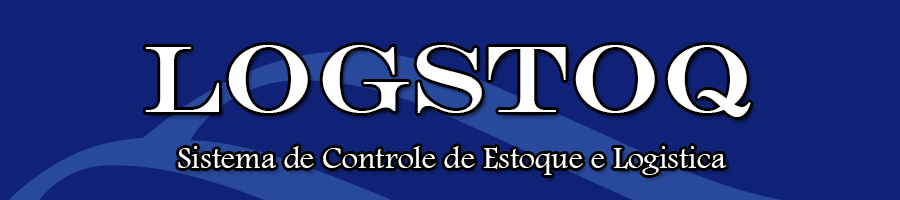
<style>
.page{position:relative;width:900px;height:200px;background:#102278}
.page>*{position:absolute;margin:0}
.t1{font:96px "EngraversMT";color:#ffffff}
.t2{font:32px "FootlightMTLight";color:#ffffff}
</style>
<div class="page">
<p class="t1" style="left:145px;top:45px;width:606px;height:72px">LogStoq</p>
<p class="t2" style="left:178px;top:146px;width:548px;height:29px">Sistema de Controle de Estoque e Logistica</p>
</div>
